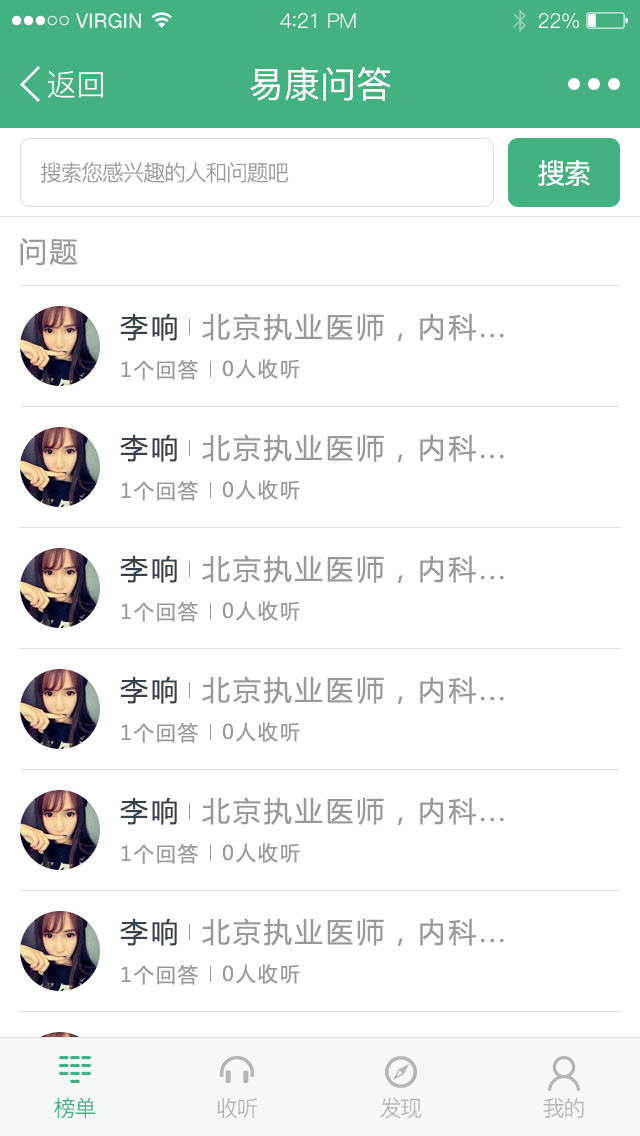
<style>
.page{position:relative;width:640px;height:1136px;background:#ffffff}
.page>*{position:absolute;margin:0}
.t1{font:19.6px "HelveticaNeue";letter-spacing:0.02em;color:#ffffff}
.t2{font:20.4px "PingFang-SC-Regular";letter-spacing:-0.02em;color:#ffffff}
.t3{font:22.1px "PingFang-SC-Regular";letter-spacing:-0.02em;color:#ffffff}
.t4{font:30px "PingFang-SC-Regular";color:#ffffff}
.t5{font:36px "PingFang-SC-Medium";color:#ffffff}
.t6{font:28px "PingFang-SC-Medium";letter-spacing:-0.06em;color:#ffffff}
.t7{font:22px "PingFang-SC-Regular";letter-spacing:-0.06em;color:#999999}
.t8{font:28px "MicrosoftYaHei";letter-spacing:0.1em;color:#999999}
.t9{font:28px "MicrosoftYaHei";letter-spacing:0.1em;color:#35424b}
.t10{font:20px "MicrosoftYaHei";letter-spacing:0.1em;color:#999999}
.t11{font:22px "PingFang-SC-Regular";letter-spacing:-0.06em;color:#44b181}
.t12{font:22px "PingFang-SC-Regular";letter-spacing:-0.06em;color:#b4b5b6}
</style>
<div class="page">
<p class="t1" style="left:76px;top:13px;width:65px;height:16px">VIRGIN</p>
<p class="t2" style="left:280px;top:13px;width:76px;height:15px">4<span class="t3">:</span>21 PM</p>
<p class="t2" style="left:539px;top:13px;width:40px;height:16px">22%</p>
<p class="t4" style="left:48px;top:71px;width:55px;height:27px">返回</p>
<p class="t5" style="left:250px;top:67px;width:141px;height:34px">易康问答</p>
<p class="t6" style="left:538px;top:160px;width:52px;height:26px">搜索</p>
<p class="t7" style="left:40px;top:162px;width:249px;height:21px">搜索您感兴趣的人和问题吧</p>
<p class="t8" style="left:20px;top:238px;width:58px;height:28px">问题</p>
<p class="t9" style="left:120px;top:313px;width:57px;height:28px">李响</p>
<p class="t8" style="left:202px;top:313px;width:302px;height:28px">北京执业医师，内科...</p>
<p class="t10" style="left:121px;top:360px;width:77px;height:20px">1个回答</p>
<p class="t10" style="left:222px;top:359px;width:78px;height:20px">0人收听</p>
<p class="t9" style="left:120px;top:434px;width:57px;height:28px">李响</p>
<p class="t8" style="left:202px;top:434px;width:302px;height:28px">北京执业医师，内科...</p>
<p class="t10" style="left:121px;top:481px;width:77px;height:20px">1个回答</p>
<p class="t10" style="left:222px;top:480px;width:78px;height:20px">0人收听</p>
<p class="t9" style="left:120px;top:555px;width:57px;height:28px">李响</p>
<p class="t8" style="left:202px;top:555px;width:302px;height:28px">北京执业医师，内科...</p>
<p class="t10" style="left:121px;top:602px;width:77px;height:20px">1个回答</p>
<p class="t10" style="left:222px;top:601px;width:78px;height:20px">0人收听</p>
<p class="t9" style="left:120px;top:676px;width:57px;height:28px">李响</p>
<p class="t8" style="left:202px;top:676px;width:302px;height:28px">北京执业医师，内科...</p>
<p class="t10" style="left:121px;top:723px;width:77px;height:20px">1个回答</p>
<p class="t10" style="left:222px;top:722px;width:78px;height:20px">0人收听</p>
<p class="t9" style="left:120px;top:797px;width:57px;height:28px">李响</p>
<p class="t8" style="left:202px;top:797px;width:302px;height:28px">北京执业医师，内科...</p>
<p class="t10" style="left:121px;top:844px;width:77px;height:20px">1个回答</p>
<p class="t10" style="left:222px;top:843px;width:78px;height:20px">0人收听</p>
<p class="t9" style="left:120px;top:918px;width:57px;height:28px">李响</p>
<p class="t8" style="left:202px;top:918px;width:302px;height:28px">北京执业医师，内科...</p>
<p class="t10" style="left:121px;top:965px;width:77px;height:20px">1个回答</p>
<p class="t10" style="left:222px;top:964px;width:78px;height:20px">0人收听</p>
<p class="t11" style="left:54px;top:1097px;width:42px;height:22px">榜单</p>
<p class="t12" style="left:380px;top:1097px;width:42px;height:22px">发现</p>
<p class="t12" style="left:543px;top:1097px;width:41px;height:21px">我的</p>
<p class="t12" style="left:217px;top:1098px;width:41px;height:21px">收听</p>
</div>
